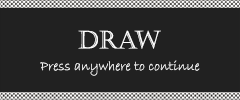
<style>
.page{position:relative;width:240px;height:100px;background:#212121}
.page>*{position:absolute;margin:0}
.t1{font:24.2px "Castellar";color:#ffffff}
.t2{font:14.1px "BradleyHandITC";color:#ffffff}
</style>
<div class="page">
<p class="t1" style="left:78px;top:30px;width:83px;height:19px">Draw</p>
<p class="t2" style="left:40px;top:60px;width:160px;height:16px">Press anywhere to continue</p>
</div>
